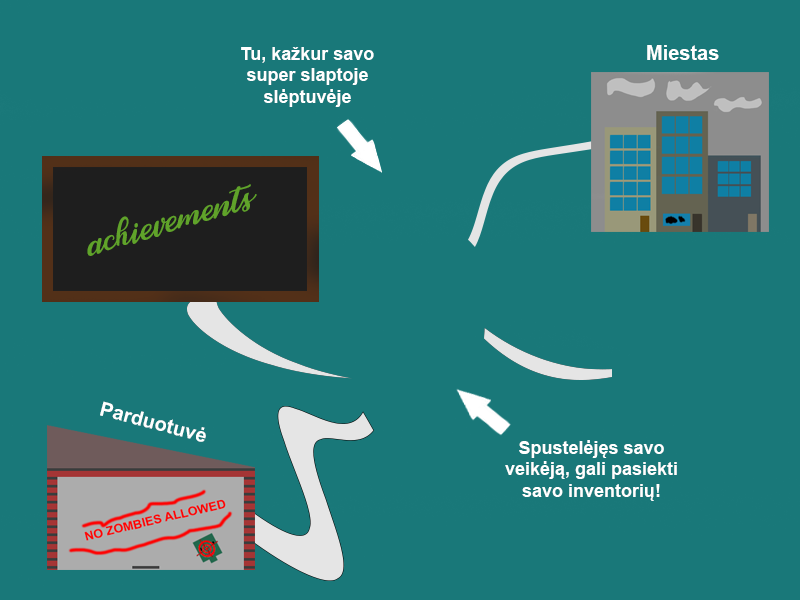
<style>
.page{position:relative;width:800px;height:600px;background:#197879}
.page>*{position:absolute;margin:0}
.t1{font:18px "Arial-BoldMT";color:#ffffff}
.t2{font:20px "Arial-BoldMT";color:#ffffff}
.t3{font:24px "CassandraPersonalUse-Regular";color:#60a32a}
</style>
<div class="page">
<p class="t1" style="left:241px;top:47px;width:133px;height:60px;text-align:center">Tu, kažkur savo super slaptoje slėptuvėje</p>
<p class="t2" style="left:647px;top:45px;width:72px;height:15px">Miestas</p>
<p class="t3" style="left:87px;top:184px;width:170px;height:72px;rotate:-17deg">achievements</p>
<p class="t2" style="left:100px;top:401px;width:106px;height:41px;rotate:15deg">Parduotuvė</p>
<p class="t1" style="left:505px;top:440px;width:172px;height:61px;text-align:center">Spustelėjęs savo veikėją, gali pasiekti savo inventorių!</p>
</div>
